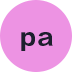
<style>
.page{position:relative;width:72px;height:72px;background:#ed93e3}
.page>*{position:absolute;margin:0}
.t1{font:23px "FZLTDHK--GBK1-0";letter-spacing:0.05em;color:#1d1f2e}
</style>
<div class="page">
<p class="t1" style="left:21px;top:32px;width:32px;height:19px">pa</p>
</div>
